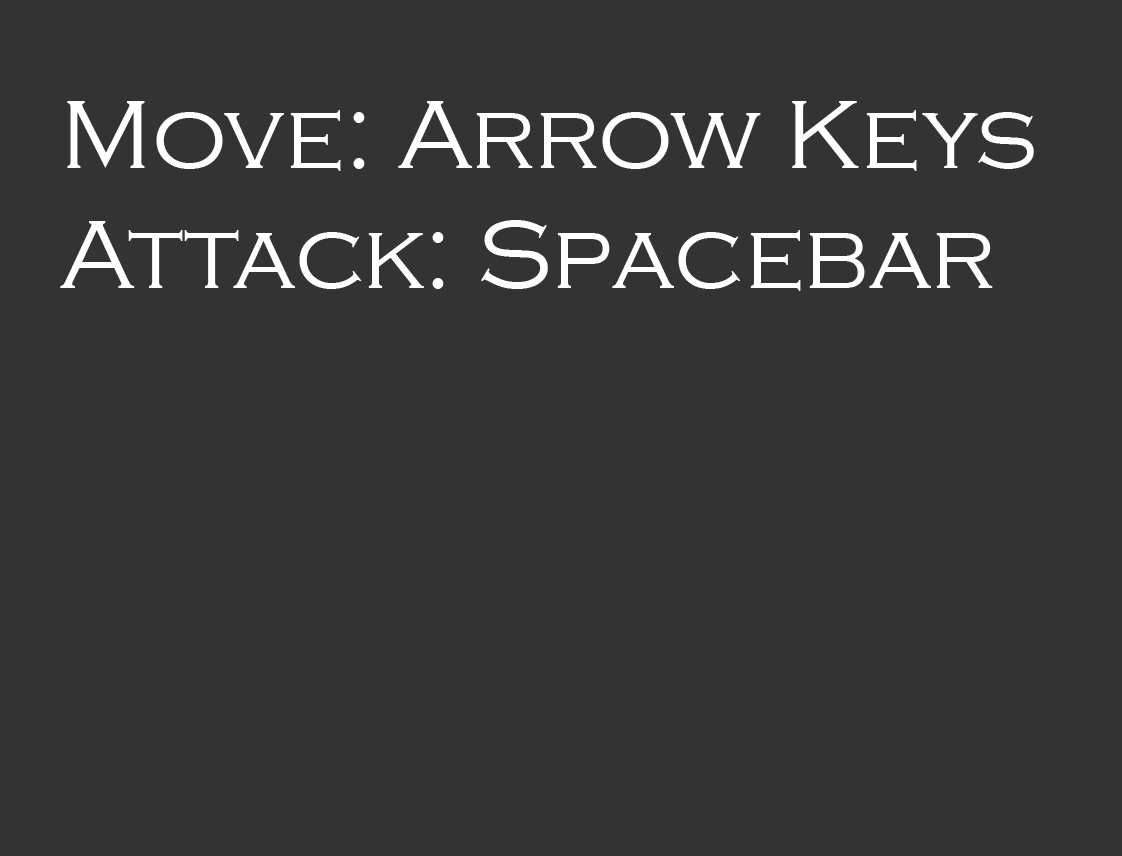
<style>
.page{position:relative;width:1122px;height:856px;background:#333333}
.page>*{position:absolute;margin:0}
.t1{font:100px "CopperplateGothic-Light";color:#ffffff}
</style>
<div class="page">
<p class="t1" style="left:60px;top:101px;width:974px;height:190px">Move: Arrow Keys<br>Attack: Spacebar</p>
</div>
